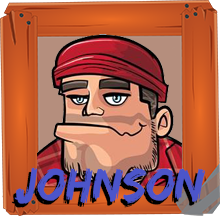
<style>
.page{position:relative;width:220px;height:216px}
.page>*{position:absolute;margin:0}
.t1{font:48px "EdoSZ"}
.t2{font:48px "EdoSZ";color:#4c55ca}
</style>
<div class="page">
<p class="t1" style="left:11px;top:171px;width:191px;height:37px">Johnson</p>
<p class="t2" style="left:14px;top:167px;width:191px;height:37px">Johnson</p>
</div>
